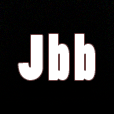
<style>
.page{position:relative;width:114px;height:114px;background:#000000}
.page>*{position:absolute;margin:0}
.t1{font:60px "PoplarStd";letter-spacing:0.075em;color:#ffffff}
</style>
<div class="page">
<p class="t1" style="left:18px;top:34px;width:77px;height:46px">Jbb</p>
</div>
